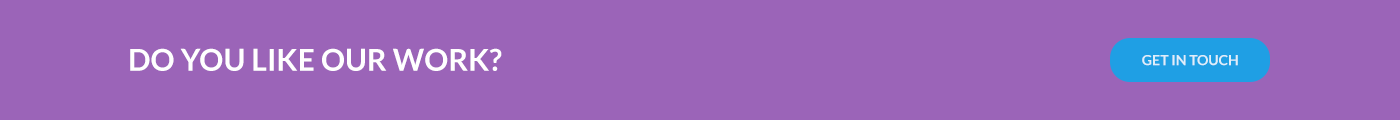
<style>
.page{position:relative;width:1400px;height:120px;background:#9b64b8}
.page>*{position:absolute;margin:0}
.t1{font:30px "Lato-Bold";letter-spacing:0.005em;color:#ffffff}
.t2{font:14px "Lato-Bold";color:#dfeefa}
</style>
<div class="page">
<p class="t1" style="left:130px;top:48px;width:372px;height:23px">DO YOU LIKE OUR WORK?</p>
<p class="t2" style="left:1142px;top:55px;width:96px;height:11px">GET IN TOUCH</p>
</div>
